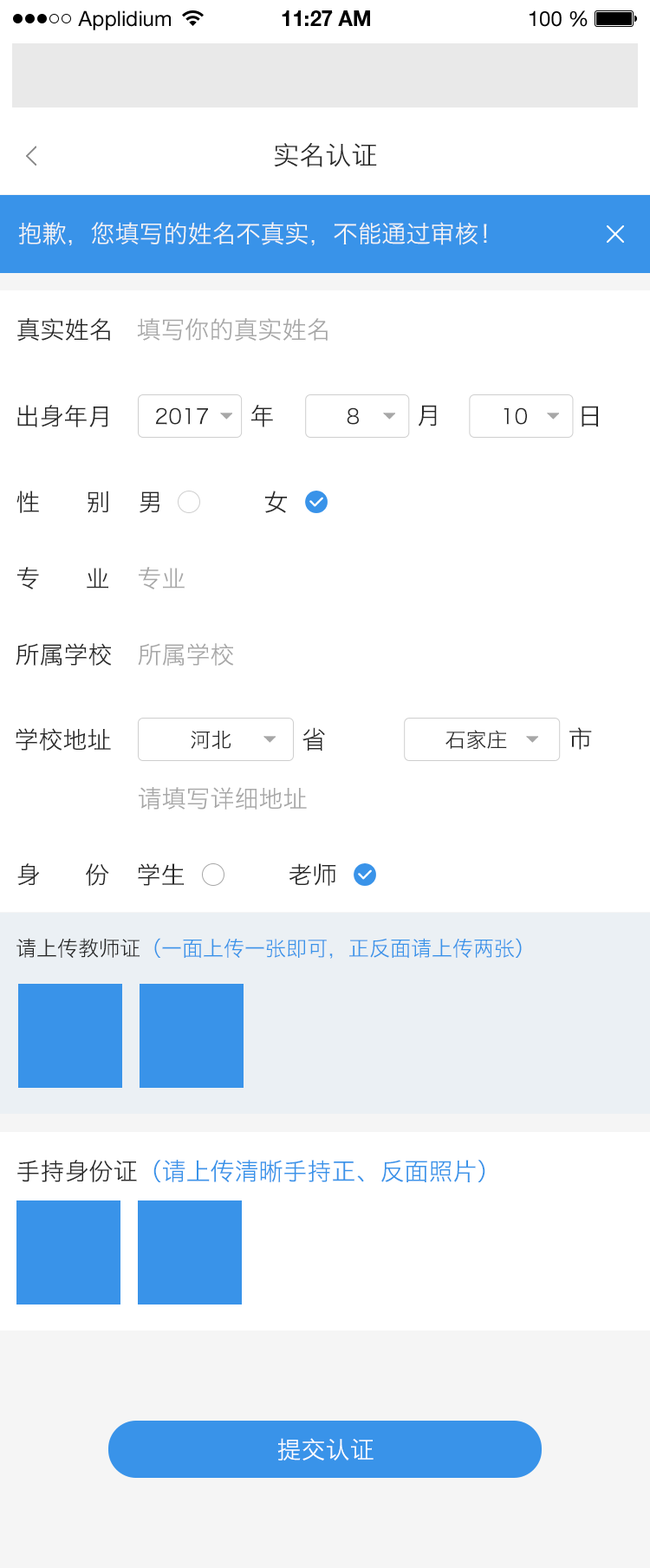
<style>
.page{position:relative;width:650px;height:1568px;background:#ffffff}
.page>*{position:absolute;margin:0}
.t1{font:20.8px "HelveticaNeueLTStd-Roman";color:#000000}
.t2{font:20.8px "HelveticaNeueLTStd-Bd";color:#000000}
.t3{font:26px "HiraginoSansGB-W3";color:#282828}
.t4{font:24.3px "HiraginoSansGB-W3";color:#f5f5f5}
.t5{font:24.3px "HiraginoSansGB-W3";color:#282828}
.t6{font:24.3px "HiraginoSansGB-W3";color:#a7a7a7}
.t7{font:20.8px "HiraginoSansGB-W3";color:#282828}
.t8{font:20.8px "HiraginoSansGB-W3";color:#3993e9}
.t9{font:24.3px "HiraginoSansGB-W3";color:#3993e9}
.t10{font:24.3px "HiraginoSansGB-W3";color:#ffffff}
</style>
<div class="page">
<p class="t1" style="left:78px;top:10px;width:93px;height:20px">Applidium</p>
<p class="t2" style="left:282px;top:10px;width:88px;height:16px">11:27 AM</p>
<p class="t1" style="left:530px;top:10px;width:58px;height:17px">100 %</p>
<p class="t3" style="left:274px;top:142px;width:103px;height:25px">实名认证</p>
<p class="t4" style="left:18px;top:222px;width:469px;height:24px">抱歉，您填写的姓名不真实，不能通过审核！</p>
<p class="t5" style="left:17px;top:318px;width:93px;height:24px">真实姓名</p>
<p class="t6" style="left:137px;top:318px;width:191px;height:24px">填写你的真实姓名</p>
<p class="t5" style="left:17px;top:405px;width:91px;height:22px">出身年月</p>
<p class="t7" style="left:155px;top:407px;width:53px;height:18px">2017</p>
<p class="t5" style="left:251px;top:405px;width:22px;height:22px">年</p>
<p class="t7" style="left:347px;top:407px;width:12px;height:18px">8</p>
<p class="t5" style="left:418px;top:405px;width:19px;height:21px">月</p>
<p class="t7" style="left:504px;top:407px;width:23px;height:18px">10</p>
<p class="t5" style="left:582px;top:406px;width:17px;height:21px">日</p>
<p class="t5" style="left:16px;top:491px;width:92px;height:22px">性     别</p>
<p class="t5" style="left:140px;top:491px;width:19px;height:22px">男</p>
<p class="t5" style="left:265px;top:491px;width:22px;height:22px">女</p>
<p class="t5" style="left:17px;top:567px;width:91px;height:22px">专     业</p>
<p class="t6" style="left:139px;top:567px;width:46px;height:22px">专业</p>
<p class="t5" style="left:16px;top:643px;width:96px;height:23px">所属学校</p>
<p class="t6" style="left:138px;top:643px;width:96px;height:23px">所属学校</p>
<p class="t5" style="left:16px;top:728px;width:95px;height:23px">学校地址</p>
<p class="t7" style="left:191px;top:731px;width:40px;height:18px">河北</p>
<p class="t5" style="left:303px;top:727px;width:22px;height:24px">省</p>
<p class="t7" style="left:446px;top:730px;width:61px;height:19px">石家庄</p>
<p class="t5" style="left:569px;top:727px;width:23px;height:23px">市</p>
<p class="t6" style="left:139px;top:787px;width:168px;height:23px">请填写详细地址</p>
<p class="t5" style="left:17px;top:863px;width:92px;height:23px">身     份</p>
<p class="t5" style="left:138px;top:863px;width:46px;height:23px">学生</p>
<p class="t5" style="left:289px;top:863px;width:47px;height:23px">老师</p>
<p class="t8" style="left:16px;top:938px;width:506px;height:21px"><span class="t7">请上传教师证</span>（一面上传一张即可，正反面请上传两张）</p>
<p class="t9" style="left:17px;top:1160px;width:468px;height:22px"><span class="t5">手持身份证</span>（请上传清晰手持正、反面照片）</p>
<p class="t10" style="left:277px;top:1438px;width:97px;height:23px">提交认证</p>
</div>
